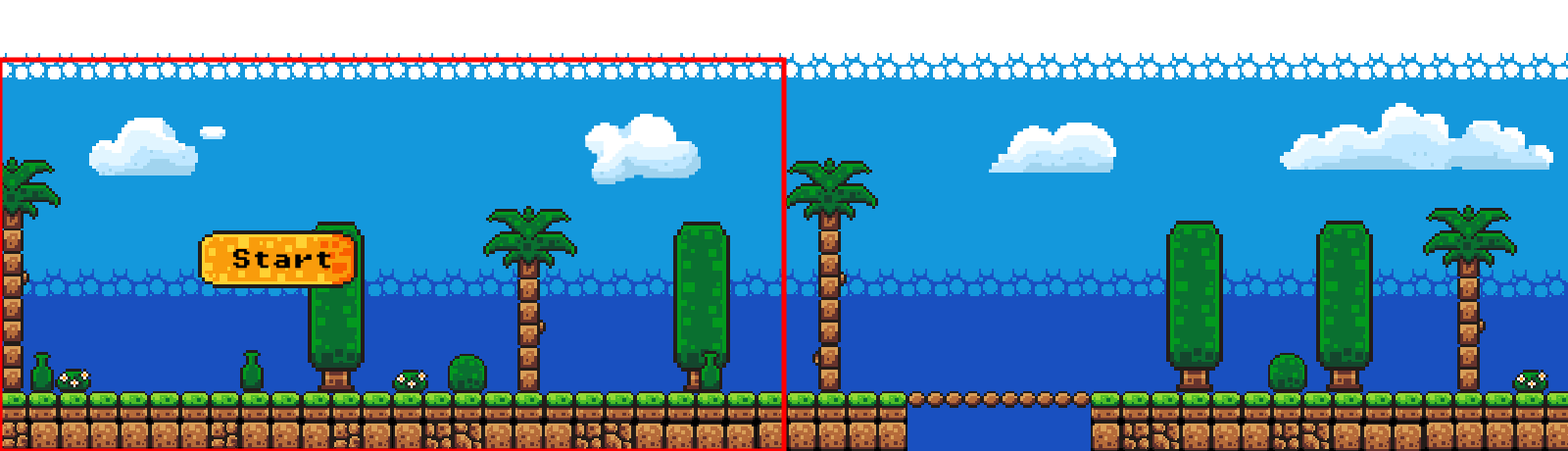
<style>
.page{position:relative;width:1568px;height:451px;background:#1498dc}
.page>*{position:absolute;margin:0}
.t1{font:21.6px "PixelOperator8-Bold";color:#000000}
</style>
<div class="page">
<p class="t1" style="left:233px;top:249px;width:98px;height:20px">Start</p>
</div>
